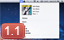
<style>
.page{position:relative;width:64px;height:40px}
.page>*{position:absolute;margin:0}
.t1{font:12px "ArialMT";color:#ffffff}
</style>
<div class="page">
<p class="t1" style="left:5px;top:26px;width:14px;height:9px">1.1</p>
</div>
